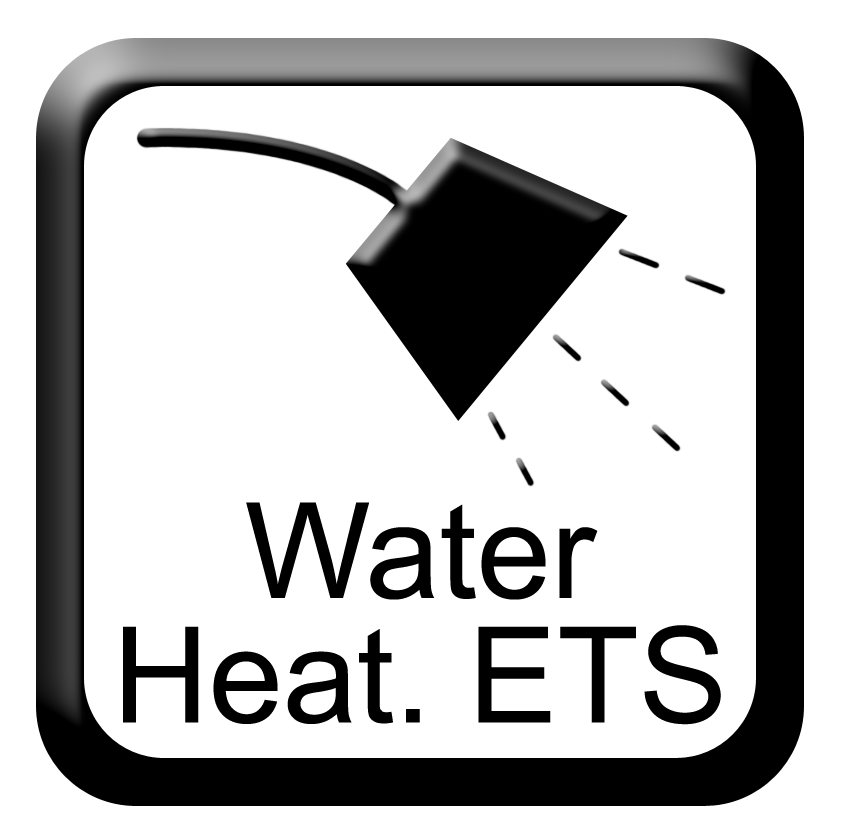
<style>
.page{position:relative;width:844px;height:836px;background:#ffffff}
.page>*{position:absolute;margin:0}
.t1{font:133.3px/124.4px "ArialMT";color:#000000}
</style>
<div class="page">
<p class="t1" style="left:123px;top:502px;width:598px;height:223px;text-align:center">Water<br>Heat. ETS</p>
</div>
